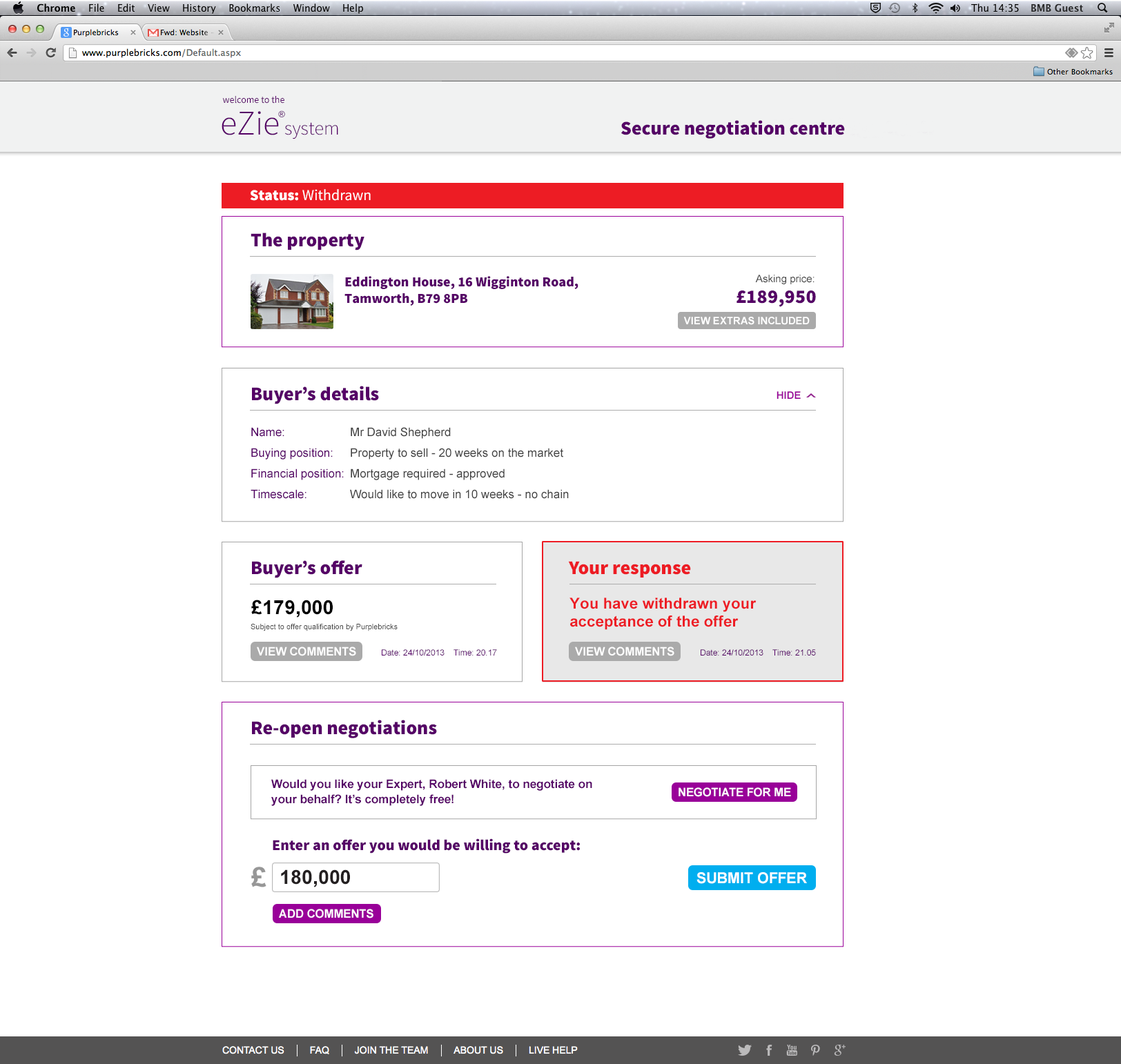
<style>
.page{position:relative;width:1121px;height:1064px;background:#ffffff}
.page>*{position:absolute;margin:0}
.t1{font:19.3px "SourceSansPro-Black";color:#550066}
.t2{font:15.2px "SourceSansPro-Regular";color:#ffffff}
.t3{font:15.2px "SourceSansPro-Black";color:#ffffff}
.t4{font:13.8px "SourceSansPro-Black";color:#550066}
.t5{font:10.4px "ArialMT";color:#424242}
.t6{font:19.3px "SourceSansPro-Black";letter-spacing:0.01em;color:#550066}
.t7{font:10.4px "Arial-BoldMT";color:#ffffff}
.t8{font:10.4px "Arial-BoldMT";color:#990099;text-transform:uppercase}
.t9{font:11.7px/20.7px "ArialMT";color:#424242}
.t10{font:11.7px/20.7px "ArialMT";color:#550066}
.t11{font:19.3px "SourceSansPro-Black";color:#ed1c24}
.t12{font:19.5px "Arial-BoldMT";color:#000000}
.t13{font:15.2px "Arial-BoldMT";color:#ed1c24}
.t14{font:7.6px "ArialMT";color:#424242}
.t15{font:11.7px "Arial-BoldMT";color:#ffffff}
.t16{font:8.3px "ArialMT";color:#550066}
.t17{font:11.7px/15.2px "Arial-BoldMT";color:#550066}
.t18{font:15.2px "SourceSansPro-Black";color:#550066}
.t19{font:27.3px "Arial-BoldMT";color:#979797}
.t20{font:19.5px "Arial-BoldMT";color:#231f20}
.t21{font:15.2px "Arial-BoldMT";color:#ffffff}
</style>
<div class="page">
<p class="t1" style="left:621px;top:120px;width:224px;height:19px">Secure negotiation centre</p>
<p class="t2" style="left:250px;top:189px;width:121px;height:12px"><span class="t3">Status:</span> Withdrawn</p>
<p class="t1" style="left:250px;top:233px;width:114px;height:17px">The property</p>
<p class="t4" style="left:344px;top:276px;width:234px;height:30px">Eddington House, 16 Wigginton Road,<br>Tamworth, B79 8PB</p>
<p class="t5" style="left:755px;top:275px;width:59px;height:9px">Asking price:</p>
<p class="t6" style="left:736px;top:291px;width:80px;height:16px">£189,950</p>
<p class="t7" style="left:683px;top:317px;width:126px;height:8px">VIEW EXTRAS INCLUDED</p>
<p class="t1" style="left:252px;top:386px;width:127px;height:18px">Buyer’s details</p>
<p class="t8" style="left:776px;top:391px;width:24px;height:8px">HIDE</p>
<p class="t9" style="left:250px;top:427px;width:319px;height:72px"><span class="t10">Name:   </span>Mr David Shepherd<br><span class="t10">Buying position: </span>Property to sell - 20 weeks on the market<br><span class="t10">Financial position: </span>Mortgage required - approved<br><span class="t10">Timescale:  </span>Would like to move in 10 weeks - no chain</p>
<p class="t1" style="left:252px;top:560px;width:110px;height:18px">Buyer’s offer</p>
<p class="t11" style="left:568px;top:561px;width:123px;height:17px">Your response</p>
<p class="t12" style="left:251px;top:600px;width:82px;height:18px">£179,000</p>
<p class="t13" style="left:569px;top:598px;width:187px;height:32px">You have withdrawn your<br>acceptance of the offer</p>
<p class="t14" style="left:250px;top:624px;width:147px;height:7px">Subject to offer qualification by Purplebricks</p>
<p class="t15" style="left:257px;top:647px;width:99px;height:9px">VIEW COMMENTS</p>
<p class="t16" style="left:382px;top:649px;width:115px;height:7px">Date: 24/10/2013    Time: 20.17</p>
<p class="t15" style="left:575px;top:647px;width:99px;height:9px">VIEW COMMENTS</p>
<p class="t16" style="left:700px;top:649px;width:116px;height:7px">Date: 24/10/2013    Time: 21.05</p>
<p class="t1" style="left:252px;top:720px;width:185px;height:18px">Re-open negotiations</p>
<p class="t17" style="left:271px;top:779px;width:321px;height:27px">Would you like your Expert, Robert White, to negotiate on your behalf? It’s completely free!</p>
<p class="t15" style="left:678px;top:787px;width:113px;height:10px">NEGOTIATE FOR ME</p>
<p class="t18" style="left:273px;top:838px;width:307px;height:16px">Enter an offer you would be willing to accept:</p>
<p class="t19" style="left:251px;top:867px;width:15px;height:20px">£</p>
<p class="t20" style="left:281px;top:869px;width:69px;height:18px">180,000</p>
<p class="t21" style="left:696px;top:872px;width:111px;height:12px">SUBMIT OFFER</p>
<p class="t15" style="left:279px;top:909px;width:94px;height:9px">ADD COMMENTS</p>
</div>
